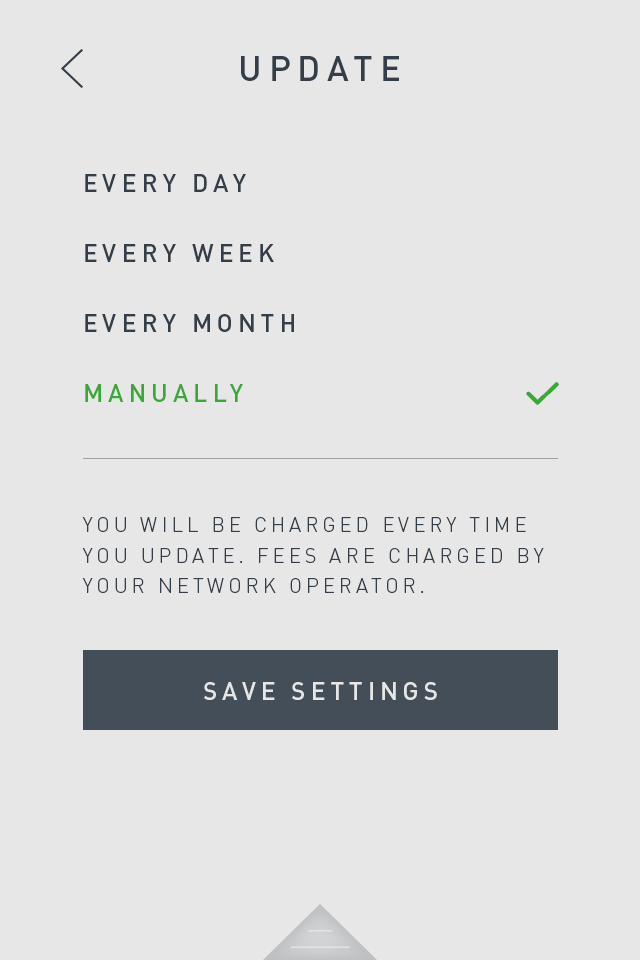
<style>
.page{position:relative;width:640px;height:960px;background:#e8e7e8}
.page>*{position:absolute;margin:0}
.t1{font:35px "DINPro-Medium";letter-spacing:0.2em;color:#333e48}
.t2{font:20.3px/30.3px "DINPro-Light";letter-spacing:0.2em;color:#333e48}
.t3{font:25px/70px "DINPro-Medium";letter-spacing:0.2em;color:#333e48}
.t4{font:25px/70px "DINPro-Medium";letter-spacing:0.2em;color:#39a935}
.t5{font:25.2px/106.3px "DINPro-Medium";letter-spacing:0.2em;color:#e8e7e8}
.t6{font:25.3px/106.3px "DINPro-Medium";letter-spacing:0.2em;color:#e8e7e8}
</style>
<div class="page">
<p class="t1" style="left:241px;top:56px;width:158px;height:25px">UPDATE</p>
<p class="t2" style="left:82px;top:174px;width:462px;height:419px"><span class="t3">EVERY DAY<br>EVERY WEEK<br>EVERY MONTH<br></span><span class="t4">MANUALLY<br><br></span><br>YOU WILL BE CHARGED EVERY TIME YOU UPDATE. FEES ARE CHARGED BY YOUR NETWORK OPERATOR.</p>
<p class="t5" style="left:204px;top:682px;width:233px;height:18px;text-align:center">SAVE SETTINGS<br><span class="t6">ISCH</span></p>
</div>
